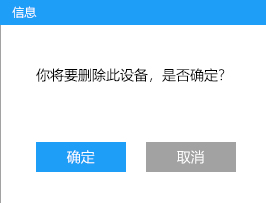
<style>
.page{position:relative;width:266px;height:203px;background:#ffffff}
.page>*{position:absolute;margin:0}
.t1{font:12px "MicrosoftYaHeiLight";color:#ffffff}
.t2{font:14px "MicrosoftYaHeiLight";color:#000000}
.t3{font:14px "MicrosoftYaHeiLight";color:#ffffff}
</style>
<div class="page">
<p class="t1" style="left:12px;top:6px;width:25px;height:12px">信息</p>
<p class="t2" style="left:36px;top:68px;width:189px;height:14px">你将要删除此设备，是否确定？</p>
<p class="t3" style="left:66px;top:150px;width:29px;height:14px">确定</p>
<p class="t3" style="left:177px;top:150px;width:27px;height:14px">取消</p>
</div>
